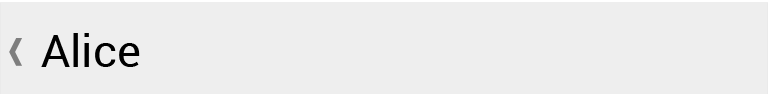
<style>
.page{position:relative;width:768px;height:94px;background:#eeeeee}
.page>*{position:absolute;margin:0}
.t1{font:45px "Roboto-Regular";color:#000000}
</style>
<div class="page">
<p class="t1" style="left:41px;top:33px;width:99px;height:34px">Alice</p>
</div>
